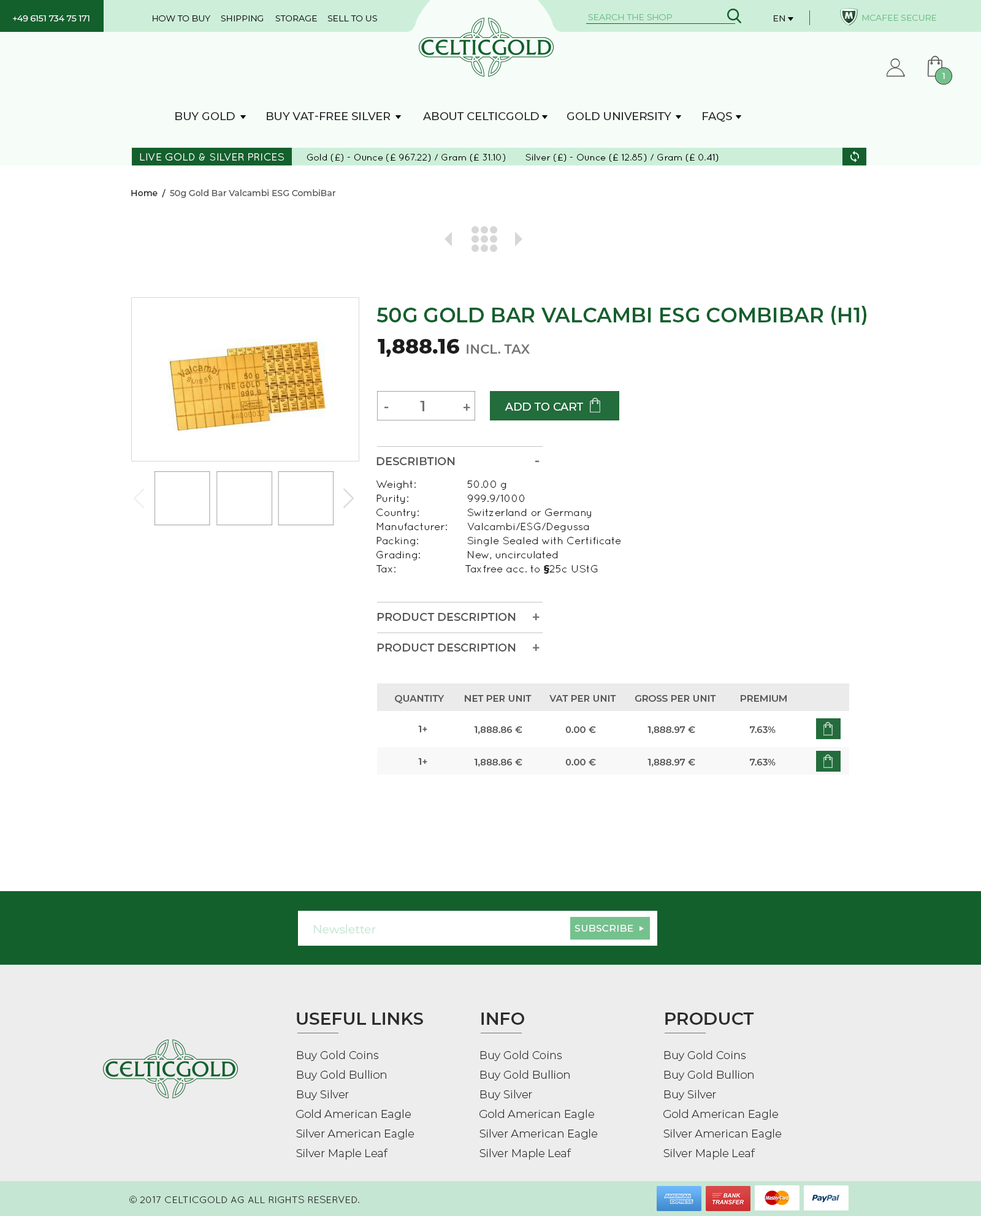
<style>
.page{position:relative;width:981px;height:1216px;background:#ffffff}
.page>*{position:absolute;margin:0}
.t1{font:8.6px "Montserrat-Regular";color:#ffffff;text-transform:uppercase}
.t2{font:8.6px "Montserrat-Regular";color:#1d1d1d;text-transform:uppercase}
.t3{font:8.6px "Montserrat-Regular";color:#75c18e;text-transform:uppercase}
.t4{font:11px "Montserrat-Medium";color:#1d1d1d;text-transform:uppercase}
.t5{font:10.4px "Quicksand-Regular";color:#ffffff;text-transform:uppercase}
.t6{font:9.2px "Quicksand-Regular";color:#000000}
.t7{font:8.6px "Montserrat-Medium";color:#565656}
.t8{font:8.6px "Montserrat-Medium";color:#1d1d1d}
.t9{font:20.2px "Montserrat-SemiBold";color:#13602d;text-transform:uppercase}
.t10{font:20.2px "Montserrat-ExtraBold";color:#1d1d1d;text-transform:uppercase}
.t11{font:12.9px "Montserrat-SemiBold";color:#737373;text-transform:uppercase}
.t12{font:14.1px "Montserrat-SemiBold";color:#737373;text-transform:uppercase}
.t13{font:11px "Montserrat-Medium";color:#ffffff;text-transform:uppercase}
.t14{font:11px "Montserrat-SemiBold";color:#565656;text-transform:uppercase}
.t15{font:10.4px/14.1px "Quicksand-Regular";color:#1d1d1d}
.t16{font:10.4px/14.1px "Montserrat-ExtraBold";color:#1d1d1d}
.t17{font:9.2px "Montserrat-SemiBold";color:#565656;text-transform:uppercase}
.t18{font:11.6px "Montserrat-Regular";color:#c5e6d3}
.t19{font:11.6px "Montserrat-Regular";color:#ffffff;font-variant:small-caps}
.t20{font:17.2px "Montserrat-SemiBold";color:#2c2c2c;text-transform:uppercase}
.t21{font:11px/19.6px "Montserrat-Light";color:#2c2c2c}
.t22{font:9.8px "Quicksand-Regular";color:#2c2c2c;text-transform:uppercase}
</style>
<div class="page">
<p class="t1" style="left:13px;top:15px;width:76px;height:6px">+49 6151 734 75 171</p>
<p class="t2" style="left:153px;top:15px;width:57px;height:6px">How to Buy</p>
<p class="t2" style="left:221px;top:15px;width:42px;height:6px">Shipping</p>
<p class="t2" style="left:275px;top:15px;width:42px;height:6px">Storage</p>
<p class="t2" style="left:327px;top:15px;width:50px;height:6px">Sell to Us</p>
<p class="t3" style="left:588px;top:14px;width:84px;height:6px">Search the shop</p>
<p class="t2" style="left:773px;top:15px;width:12px;height:6px">En</p>
<p class="t3" style="left:862px;top:15px;width:75px;height:6px">MCAfee SECURE</p>
<p class="t1" style="left:941px;top:73px;width:3px;height:6px">1</p>
<p class="t4" style="left:175px;top:112px;width:60px;height:8px">Buy Gold</p>
<p class="t4" style="left:267px;top:112px;width:123px;height:8px">Buy VAT-Free Silver</p>
<p class="t4" style="left:423px;top:112px;width:116px;height:8px">About CelticGold</p>
<p class="t4" style="left:567px;top:112px;width:104px;height:8px">Gold University</p>
<p class="t4" style="left:702px;top:112px;width:30px;height:10px">FAQs</p>
<p class="t5" style="left:140px;top:153px;width:144px;height:8px">Live gold &amp; silver prices</p>
<p class="t6" style="left:306px;top:154px;width:199px;height:8px">Gold (£) - Ounce (£ 967.22) / Gram (£ 31.10)</p>
<p class="t6" style="left:525px;top:154px;width:193px;height:8px">Silver (£) - Ounce (£ 12.85) / Gram (£ 0.41)</p>
<p class="t7" style="left:131px;top:189px;width:205px;height:9px"><span class="t8">Home  /  </span>50g Gold Bar Valcambi ESG CombiBar</p>
<p class="t9" style="left:376px;top:306px;width:490px;height:19px">50g Gold Bar Valcambi ESG CombiBar (h1)</p>
<p class="t10" style="left:378px;top:339px;width:81px;height:18px">1,888.16</p>
<p class="t11" style="left:466px;top:344px;width:64px;height:10px">Incl. Tax</p>
<p class="t12" style="left:420px;top:401px;width:4px;height:10px">1</p>
<p class="t12" style="left:384px;top:406px;width:5px;height:2px">-</p>
<p class="t12" style="left:463px;top:404px;width:7px;height:7px">+</p>
<p class="t13" style="left:504px;top:403px;width:79px;height:8px">Add to Cart</p>
<p class="t14" style="left:376px;top:457px;width:79px;height:8px">describtion</p>
<p class="t12" style="left:535px;top:460px;width:4px;height:2px">-</p>
<p class="t15" style="left:376px;top:480px;width:245px;height:94px">Weight:                50.00 g<br>Purity:                999.9/1000<br>Country:                Switzerland or Germany<br>Manufacturer:  Valcambi/ESG/Degussa<br>Packing:                Single Sealed with Certificate<br>Grading:         New, uncirculated<br>Tax:                      Taxfree acc. to <span class="t16">§</span>25c UStG</p>
<p class="t14" style="left:377px;top:613px;width:138px;height:8px">Product Description</p>
<p class="t12" style="left:533px;top:614px;width:6px;height:6px">+</p>
<p class="t14" style="left:377px;top:644px;width:138px;height:8px">Product Description</p>
<p class="t12" style="left:533px;top:644px;width:6px;height:7px">+</p>
<p class="t17" style="left:395px;top:695px;width:49px;height:9px">Quantity</p>
<p class="t17" style="left:465px;top:695px;width:66px;height:7px">Net Per Unit</p>
<p class="t17" style="left:549px;top:695px;width:67px;height:7px">VAT Per Unit</p>
<p class="t17" style="left:634px;top:695px;width:82px;height:7px">Gross Per Unit</p>
<p class="t17" style="left:740px;top:695px;width:46px;height:7px">Premium</p>
<p class="t17" style="left:418px;top:726px;width:9px;height:6px">1+</p>
<p class="t17" style="left:474px;top:726px;width:48px;height:8px">€ 1,888.86</p>
<p class="t17" style="left:565px;top:726px;width:31px;height:7px">€ 0.00</p>
<p class="t17" style="left:647px;top:726px;width:48px;height:8px">€ 1,888.97</p>
<p class="t17" style="left:749px;top:726px;width:26px;height:7px">7.63%</p>
<p class="t17" style="left:418px;top:758px;width:9px;height:7px">1+</p>
<p class="t17" style="left:474px;top:759px;width:48px;height:8px">€ 1,888.86</p>
<p class="t17" style="left:565px;top:759px;width:31px;height:7px">€ 0.00</p>
<p class="t17" style="left:647px;top:759px;width:48px;height:8px">€ 1,888.97</p>
<p class="t17" style="left:749px;top:759px;width:26px;height:7px">7.63%</p>
<p class="t18" style="left:314px;top:924px;width:62px;height:9px">Newsletter</p>
<p class="t19" style="left:574px;top:925px;width:59px;height:7px">subscribe</p>
<p class="t20" style="left:297px;top:1013px;width:126px;height:12px">Useful Links</p>
<p class="t20" style="left:481px;top:1013px;width:43px;height:12px">Info</p>
<p class="t20" style="left:665px;top:1013px;width:89px;height:12px">product</p>
<p class="t21" style="left:296px;top:1051px;width:118px;height:109px">Buy Gold Coins<br>Buy Gold Bullion<br>Buy Silver<br>Gold American Eagle<br>Silver American Eagle<br>Silver Maple Leaf</p>
<p class="t21" style="left:479px;top:1051px;width:119px;height:109px">Buy Gold Coins<br>Buy Gold Bullion<br>Buy Silver<br>Gold American Eagle<br>Silver American Eagle<br>Silver Maple Leaf</p>
<p class="t21" style="left:663px;top:1051px;width:118px;height:109px">Buy Gold Coins<br>Buy Gold Bullion<br>Buy Silver<br>Gold American Eagle<br>Silver American Eagle<br>Silver Maple Leaf</p>
<p class="t22" style="left:129px;top:1196px;width:230px;height:7px">© 2017 CelticGold AG All Rights Reserved.</p>
</div>
